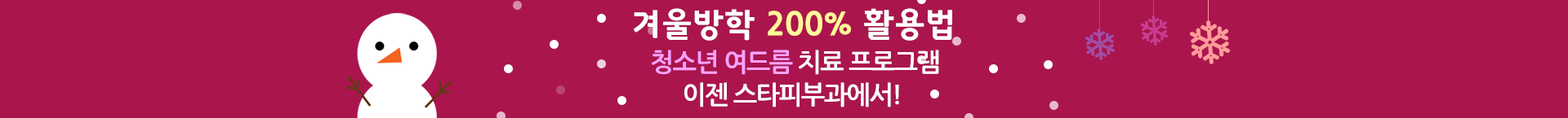
<style>
.page{position:relative;width:1568px;height:118px;background:#aa154d}
.page>*{position:absolute;margin:0}
.t1{font:32.7px "GodoB";letter-spacing:0.025em;color:#ffffff}
.t2{font:32.7px "GodoB";letter-spacing:0.025em;color:#fff799}
.t3{font:25.6px/32.7px "NanumGothicBold";letter-spacing:-0.05em;color:#ffffff}
.t4{font:25.6px/32.7px "NanumGothicBold";letter-spacing:-0.05em;color:#fba1ff}
</style>
<div class="page">
<p class="t1" style="left:634px;top:8px;width:318px;height:33px">겨울방학 <span class="t2">200% </span>활용법</p>
<p class="t3" style="left:652px;top:50px;width:287px;height:58px;text-align:center"><span class="t4">청소년 여드름</span> 치료 프로그램 <br>이젠 스타피부과에서!</p>
</div>
